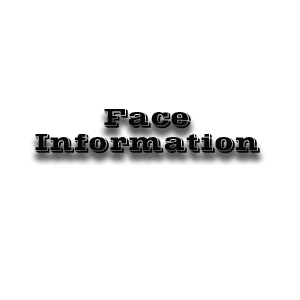
<style>
.page{position:relative;width:300px;height:300px;background:#ffffff}
.page>*{position:absolute;margin:0}
.t1{font:24px "POSTOFFICE";color:#060606}
</style>
<div class="page">
<p class="t1" style="left:104px;top:109px;width:87px;height:20px">Face</p>
<p class="t1" style="left:35px;top:134px;width:225px;height:20px">Information</p>
</div>
